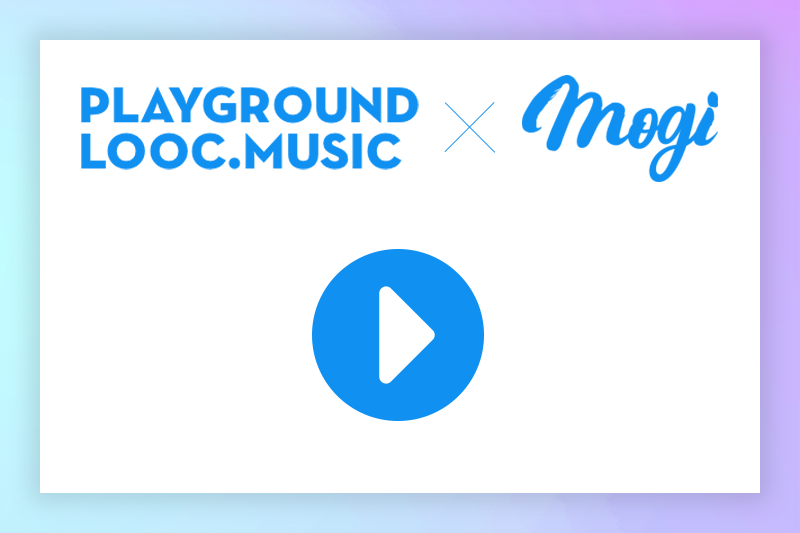
<style>
.page{position:relative;width:800px;height:533px;background:#ffffff}
.page>*{position:absolute;margin:0}
.t1{font:66.7px/46.5px "NeutraText-BoldSC";letter-spacing:-0.02em;color:#1090f1}
</style>
<div class="page">
<p class="t1" style="left:81px;top:86px;width:338px;height:84px">playground<br>looc.music</p>
</div>
